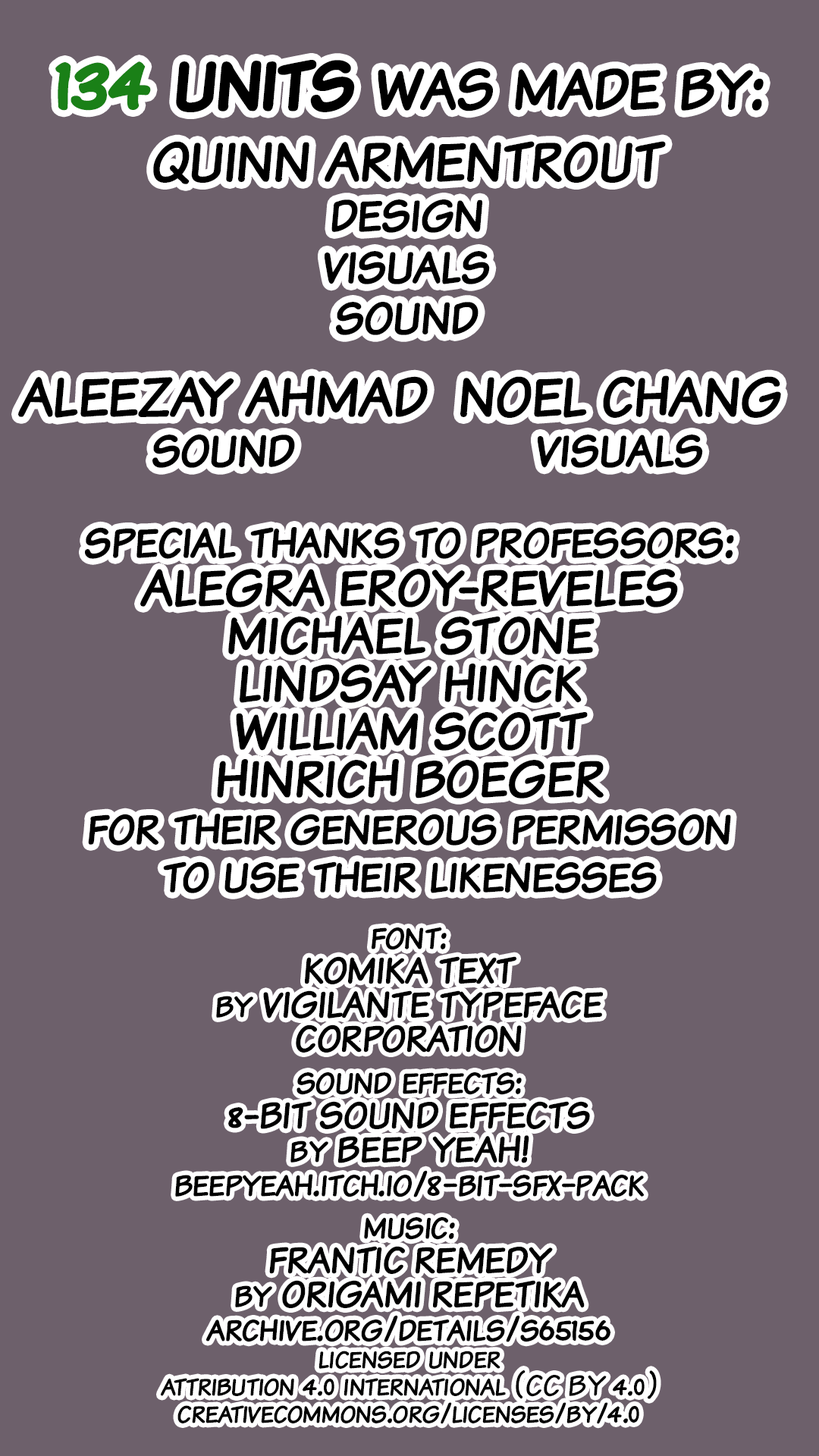
<style>
.page{position:relative;width:819px;height:1456px;background:#6d606b}
.page>*{position:absolute;margin:0}
.t1{font:73.2px "KomikaTextKaps";color:#000000}
.t2{font:86.2px "KomikaTextKaps-Bold";color:#1a8017}
.t3{font:86.2px "KomikaTextKaps-Bold";color:#000000}
.t4{font:56.9px "KomikaTextKaps";color:#000000}
.t5{font:56.9px "KomikaTextKaps-Bold";color:#000000;text-transform:uppercase}
.t6{font:53.1px "KomikaTextKaps-Bold";color:#000000;text-transform:uppercase}
.t7{font:53.1px "KomikaTextKaps";color:#000000}
.t8{font:37.9px "KomikaTextKaps-Bold";color:#000000;text-transform:uppercase}
.t9{font:37.9px "KomikaTextKaps";color:#000000}
.t10{font:30.3px "KomikaTextKaps";color:#000000}
</style>
<div class="page">
<p class="t1" style="left:55px;top:60px;width:709px;height:52px"><span class="t2">134 </span><span class="t3">units </span>was made by:</p>
<p class="t4" style="left:153px;top:141px;width:513px;height:194px;text-align:center"><span class="t5">QUINN ARMENTROUT<br></span>design<br>visuals<br>sound</p>
<p class="t5" style="left:18px;top:375px;width:410px;height:93px;text-align:center">aleezay ahmad<span class="t4"><br>sound</span></p>
<p class="t5" style="left:460px;top:375px;width:321px;height:93px;text-align:center">noel chang<br><span class="t4">visuals</span></p>
<p class="t6" style="left:85px;top:527px;width:649px;height:366px;text-align:center"><span class="t7">special thanks to professors:<br></span>alegra eroy-reveles<br>michael stone<br>lindsay hinck<br>william scott<br>hinrich boeger<br><span class="t7">for their generous permisson<br>to use their likenesses</span></p>
<p class="t8" style="left:216px;top:927px;width:387px;height:126px;text-align:center"><span class="t9">font:<br></span>KOMIKA TEXT<br><span class="t9">by </span>vigilante typeface<br>corporation</p>
<p class="t9" style="left:175px;top:1072px;width:469px;height:125px;text-align:center">sound effects:<br><span class="t8">8-bit sound effects<br></span>by <span class="t8">beep yeah!<br></span>beepyeah.itch.io/8-bit-sfx-pack</p>
<p class="t10" style="left:161px;top:1217px;width:496px;height:207px;text-align:center"><span class="t9">music:<br></span><span class="t8">frantic remedy<br></span><span class="t9">by </span><span class="t8">origami repetika<br></span><span class="t9">archive.org/details/s65156<br></span>licensed under<br>attribution 4.0 international (CC BY 4.0)<br>creativecommons.org/licenses/by/4.0</p>
</div>
